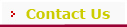
<style>
.page{position:relative;width:127px;height:27px;background:#f9f9f9}
.page>*{position:absolute;margin:0}
.t1{font:14px "Verdana-Bold";color:#cccc00}
</style>
<div class="page">
<p class="t1" style="left:26px;top:9px;width:84px;height:10px">Contact Us</p>
</div>
